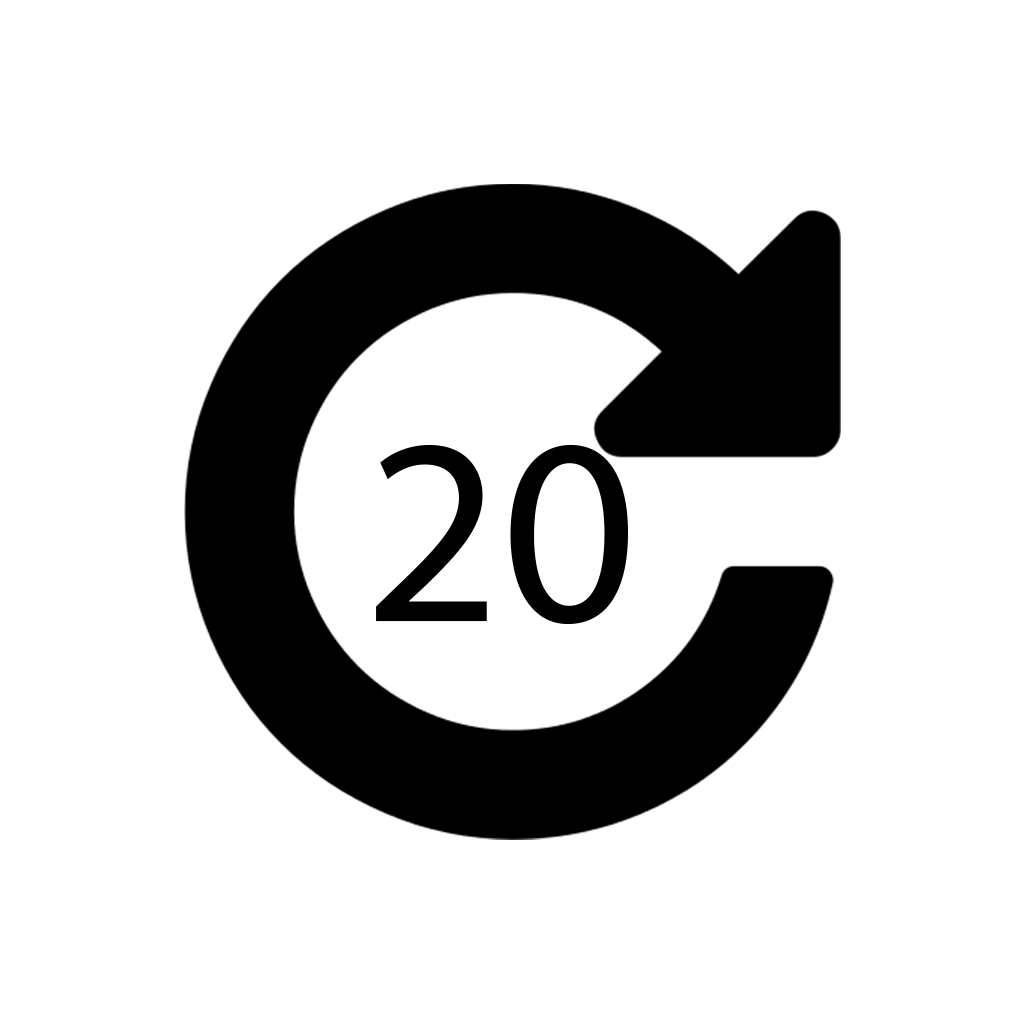
<style>
.page{position:relative;width:1024px;height:1024px;background:#ffffff}
.page>*{position:absolute;margin:0}
.t1{font:266.7px "MyriadPro-Regular";color:#000000}
</style>
<div class="page">
<p class="t1" style="left:376px;top:444px;width:252px;height:181px">20</p>
</div>
